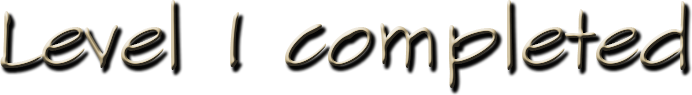
<style>
.page{position:relative;width:692px;height:95px;background:#ffffff}
.page>*{position:absolute;margin:0}
.t1{font:81.2px "SketchFlowPrint"}
</style>
<div class="page">
<p class="t1" style="left:0px;top:0px;width:686px;height:88px">Level 1 completed</p>
</div>
